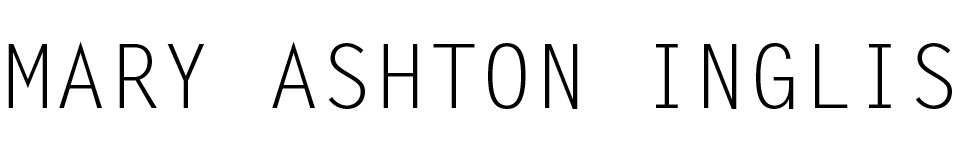
<style>
.page{position:relative;width:960px;height:150px;background:#ffffff}
.page>*{position:absolute;margin:0}
.t1{font:88.8px "LetterGothicStd";color:#000000}
</style>
<div class="page">
<p class="t1" style="left:8px;top:41px;width:944px;height:68px">MARY ASHTON INGLIS</p>
</div>
